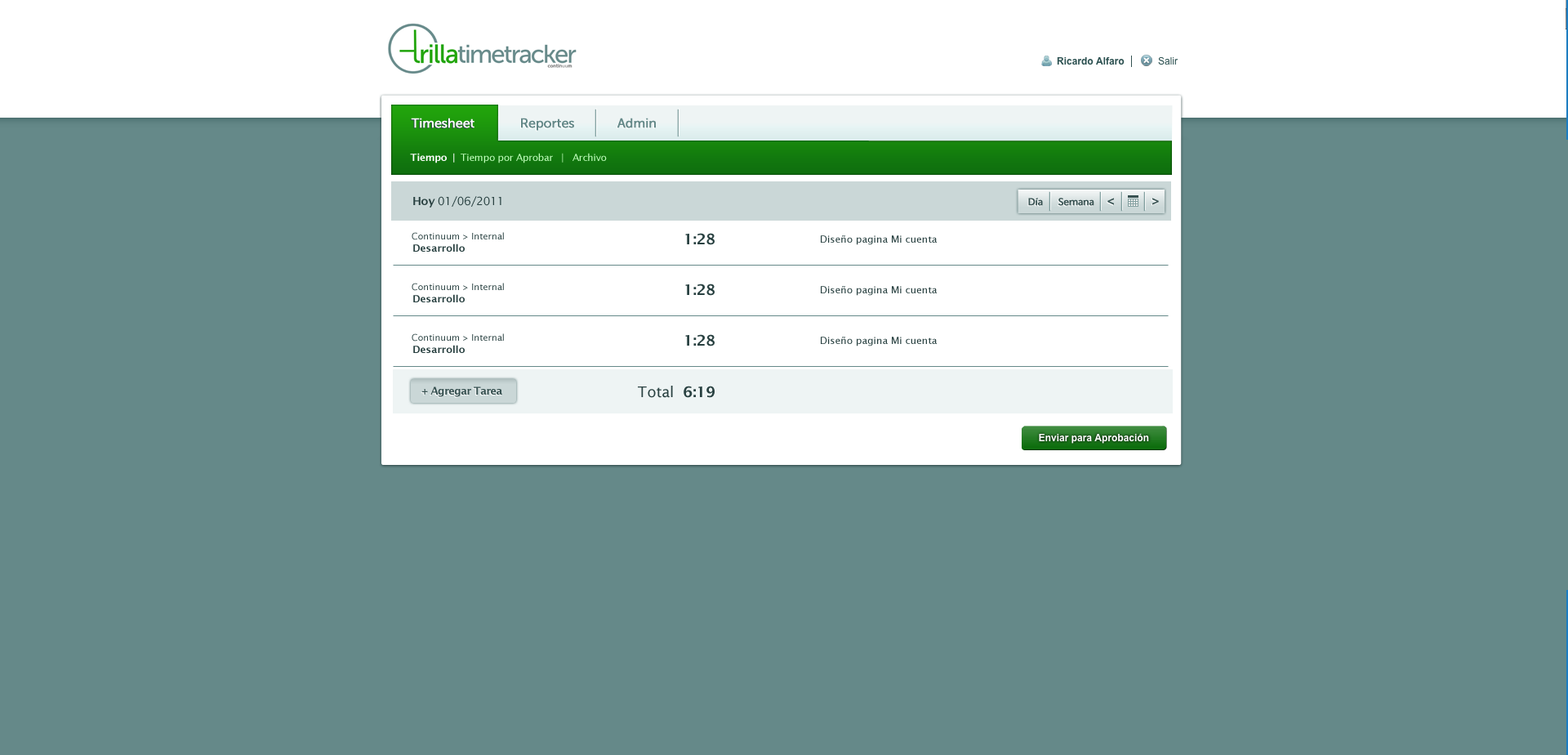
<style>
.page{position:relative;width:1568px;height:755px;background:#658989}
.page>*{position:absolute;margin:0}
.t1{font:13.1px "MuseoSans-500";letter-spacing:-0.025em;color:#ffffff;font-weight:bold}
.t2{font:13.1px "MuseoSans-500";letter-spacing:-0.025em;color:#658989;font-weight:bold}
.t3{font:9.8px "LucidaSans";letter-spacing:-0.025em;color:#c0febb}
.t4{font:9.8px "LucidaSans-Demi";letter-spacing:-0.025em;color:#ffffff}
.t5{font:11.4px "LucidaSans";letter-spacing:-0.025em;color:#294141}
.t6{font:11.4px "LucidaSans-Demi";letter-spacing:-0.025em;color:#294141}
.t7{font:9.8px "MuseoSans-500";letter-spacing:-0.025em;color:#385252;font-weight:bold}
.t8{font:13.1px "MuseoSans-500";letter-spacing:-0.025em;color:#385252;font-weight:bold}
.t9{font:9px "LucidaSans";color:#294141}
.t10{font:14.7px "LucidaSans-Demi";color:#294141}
.t11{font:9.8px "LucidaSans-Demi";color:#294141}
.t12{font:9.8px "LucidaSans";color:#294141}
.t13{font:10.6px "LucidaSans-Demi";letter-spacing:-0.05em;color:#385252}
.t14{font:14.7px "LucidaSans";color:#294141}
</style>
<div class="page">
<p class="t1" style="left:411px;top:118px;width:63px;height:10px">Timesheet</p>
<p class="t2" style="left:521px;top:118px;width:53px;height:13px">Reportes</p>
<p class="t2" style="left:617px;top:118px;width:39px;height:10px">Admin</p>
<p class="t3" style="left:410px;top:153px;width:197px;height:10px"><span class="t4">Tiempo  | </span> Tiempo por Aprobar   |   Archivo</p>
<p class="t5" style="left:413px;top:196px;width:88px;height:11px"><span class="t6">Hoy </span>01/06/2011</p>
<p class="t7" style="left:1028px;top:198px;width:66px;height:8px">Día      Semana</p>
<p class="t8" style="left:1107px;top:198px;width:52px;height:7px">&lt;           &gt;</p>
<p class="t9" style="left:412px;top:232px;width:92px;height:8px">Continuum &gt; Internal</p>
<p class="t10" style="left:685px;top:233px;width:30px;height:12px">1:28</p>
<p class="t11" style="left:413px;top:243px;width:52px;height:9px">Desarrollo</p>
<p class="t12" style="left:821px;top:235px;width:117px;height:10px">Diseño pagina Mi cuenta</p>
<p class="t9" style="left:412px;top:283px;width:92px;height:8px">Continuum &gt; Internal</p>
<p class="t11" style="left:413px;top:294px;width:52px;height:8px">Desarrollo</p>
<p class="t10" style="left:685px;top:283px;width:30px;height:13px">1:28</p>
<p class="t12" style="left:821px;top:286px;width:117px;height:10px">Diseño pagina Mi cuenta</p>
<p class="t9" style="left:412px;top:333px;width:92px;height:8px">Continuum &gt; Internal</p>
<p class="t10" style="left:685px;top:334px;width:30px;height:12px">1:28</p>
<p class="t12" style="left:821px;top:336px;width:117px;height:10px">Diseño pagina Mi cuenta</p>
<p class="t11" style="left:413px;top:345px;width:52px;height:8px">Desarrollo</p>
<p class="t13" style="left:421px;top:386px;width:81px;height:11px">+ Agregar Tarea</p>
<p class="t14" style="left:638px;top:385px;width:77px;height:13px">Total  <span class="t10">6:19</span></p>
</div>
